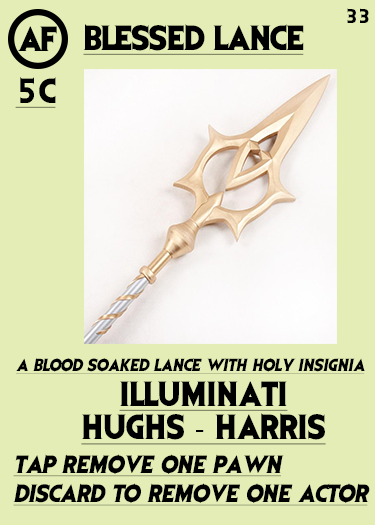
<style>
.page{position:relative;width:375px;height:525px;background:#e3edb5}
.page>*{position:absolute;margin:0}
.t1{font:16.7px "EvilDead";letter-spacing:-0.05em;color:#000000}
.t2{font:29.2px "EvilDead";letter-spacing:-0.05em;color:#000000}
.t3{font:29.2px "EvilDead";letter-spacing:-0.025em;color:#000000;text-decoration:underline}
.t4{font:29.2px "EvilDead";color:#000000;text-decoration:underline}
.t5{font:14.6px "EvilDead";color:#000000;font-style:italic;text-decoration:underline}
.t6{font:29.2px/33.3px "EvilDead";color:#000000;text-decoration:underline}
.t7{font:29.2px/33.3px "MyriadPro-Regular";color:#000000;text-decoration:underline}
.t8{font:20.8px/29.2px "EvilDead";color:#000000;font-style:italic;text-decoration:underline}
</style>
<div class="page">
<p class="t1" style="left:347px;top:8px;width:22px;height:15px">33</p>
<p class="t2" style="left:17px;top:26px;width:40px;height:25px">AF</p>
<p class="t3" style="left:83px;top:24px;width:221px;height:31px">BLESSED LANCE</p>
<p class="t4" style="left:15px;top:77px;width:41px;height:31px">5C</p>
<p class="t5" style="left:16px;top:358px;width:349px;height:16px">A blood soaked lance with holy insignia</p>
<p class="t6" style="left:81px;top:381px;width:245px;height:64px;text-align:center">Illuminati<br>Hughs <span class="t7">-</span> Harris</p>
<p class="t8" style="left:13px;top:454px;width:357px;height:52px">Tap remove one pawn<br>Discard to remove one actor</p>
</div>
